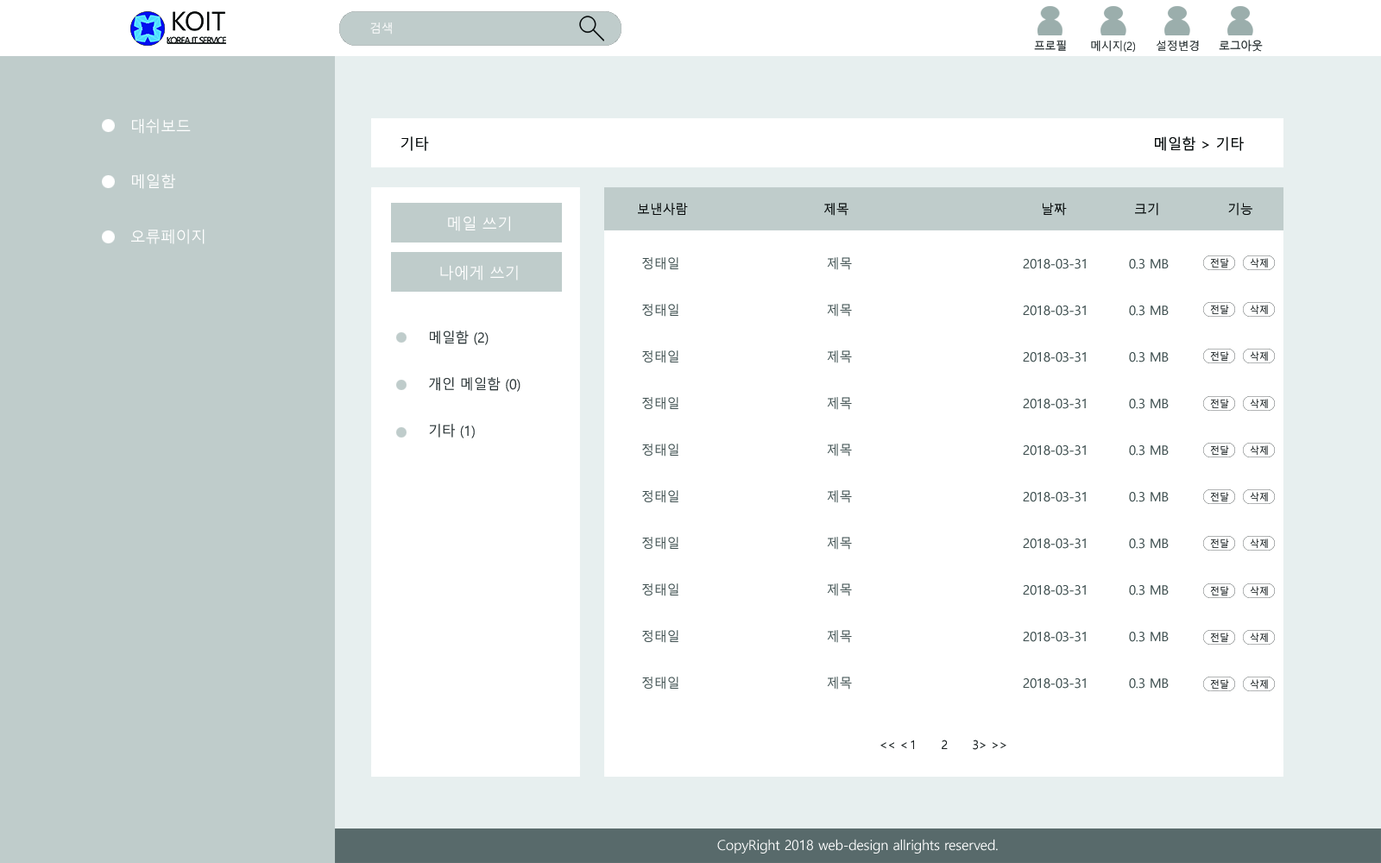
<style>
.page{position:relative;width:1381px;height:863px;background:#ffffff}
.page>*{position:absolute;margin:0}
.t1{font:12.1px "MalgunGothic";letter-spacing:-0.02em;color:#ffffff}
.t2{font:11.4px "MalgunGothic";letter-spacing:-0.02em;color:#202728}
.t3{font:11.3px "MalgunGothic";letter-spacing:-0.02em;color:#202728}
.t4{font:11.6px "MalgunGothic";letter-spacing:-0.02em;color:#202728;scale:0.96 1}
.t5{font:15.5px/55.3px "MalgunGothic";letter-spacing:-0.02em;color:#ffffff}
.t6{font:14.7px "MalgunGothic";letter-spacing:-0.02em;color:#060808}
.t7{font:14.6px "MalgunGothic";letter-spacing:-0.02em;color:#060808}
.t8{font:12.9px "MalgunGothic";letter-spacing:-0.02em;color:#060808}
.t9{font:15.5px "MalgunGothic";letter-spacing:-0.02em;color:#ffffff}
.t10{font:12.9px/46.6px "MalgunGothic";letter-spacing:-0.02em;color:#3e4e4f}
.t11{font:9.5px "MalgunGothic";letter-spacing:-0.02em;color:#181d1e}
.t12{font:13.8px/46.6px "MalgunGothic";letter-spacing:-0.02em;color:#2c3537}
.t13{font:12.1px "MalgunGothic";letter-spacing:-0.02em;color:#181d1e}
.t14{font:13.8px "MalgunGothic";letter-spacing:-0.02em;color:#ffffff}
</style>
<div class="page">
<p class="t1" style="left:370px;top:22px;width:22px;height:13px">검색</p>
<p class="t2" style="left:1034px;top:40px;width:32px;height:11px">프로필</p>
<p class="t3" style="left:1091px;top:41px;width:44px;height:11px">메시지(2)</p>
<p class="t3" style="left:1157px;top:41px;width:42px;height:10px">설정변경</p>
<p class="t4" style="left:1219px;top:40px;width:44px;height:12px">로그아웃</p>
<p class="t5" style="left:131px;top:118px;width:74px;height:126px">대쉬보드<br>메일함<br>오류페이지</p>
<p class="t6" style="left:401px;top:136px;width:28px;height:15px">기타</p>
<p class="t7" style="left:1155px;top:136px;width:89px;height:15px">메일함 &gt; 기타</p>
<p class="t8" style="left:638px;top:203px;width:615px;height:13px">보낸사람      제목       날짜   크기   기능</p>
<p class="t9" style="left:448px;top:216px;width:62px;height:15px">메일 쓰기</p>
<p class="t10" style="left:642px;top:257px;width:527px;height:433px">정태일            제목        2018-03-31      0.3 MB<br>정태일            제목        2018-03-31      0.3 MB<br>정태일            제목        2018-03-31      0.3 MB<br>정태일            제목        2018-03-31      0.3 MB<br>정태일            제목        2018-03-31      0.3 MB<br>정태일            제목        2018-03-31      0.3 MB<br>정태일            제목        2018-03-31      0.3 MB<br>정태일            제목        2018-03-31      0.3 MB<br>정태일            제목        2018-03-31      0.3 MB<br>정태일            제목        2018-03-31      0.3 MB</p>
<p class="t9" style="left:440px;top:265px;width:78px;height:16px">나에게 쓰기</p>
<p class="t11" style="left:1210px;top:258px;width:19px;height:10px">전달</p>
<p class="t11" style="left:1250px;top:258px;width:18px;height:10px">삭제</p>
<p class="t11" style="left:1210px;top:305px;width:19px;height:9px">전달</p>
<p class="t11" style="left:1250px;top:305px;width:18px;height:9px">삭제</p>
<p class="t12" style="left:429px;top:331px;width:92px;height:108px">메일함 (2)<br>개인 메일함 (0)<br>기타 (1)</p>
<p class="t11" style="left:1210px;top:351px;width:19px;height:10px">전달</p>
<p class="t11" style="left:1250px;top:351px;width:18px;height:10px">삭제</p>
<p class="t11" style="left:1210px;top:399px;width:19px;height:9px">전달</p>
<p class="t11" style="left:1250px;top:399px;width:18px;height:9px">삭제</p>
<p class="t11" style="left:1210px;top:445px;width:19px;height:10px">전달</p>
<p class="t11" style="left:1250px;top:445px;width:18px;height:10px">삭제</p>
<p class="t11" style="left:1210px;top:492px;width:19px;height:10px">전달</p>
<p class="t11" style="left:1250px;top:492px;width:18px;height:10px">삭제</p>
<p class="t11" style="left:1210px;top:539px;width:19px;height:9px">전달</p>
<p class="t11" style="left:1250px;top:539px;width:18px;height:9px">삭제</p>
<p class="t11" style="left:1210px;top:586px;width:19px;height:10px">전달</p>
<p class="t11" style="left:1250px;top:586px;width:18px;height:10px">삭제</p>
<p class="t11" style="left:1210px;top:633px;width:19px;height:9px">전달</p>
<p class="t11" style="left:1250px;top:633px;width:18px;height:9px">삭제</p>
<p class="t11" style="left:1210px;top:679px;width:19px;height:10px">전달</p>
<p class="t11" style="left:1250px;top:679px;width:18px;height:10px">삭제</p>
<p class="t13" style="left:881px;top:740px;width:126px;height:10px">&lt;&lt; &lt; 1 2 3&gt; &gt;&gt;</p>
<p class="t14" style="left:717px;top:839px;width:281px;height:15px">CopyRight 2018 web-design allrights reserved.</p>
</div>
